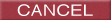
<style>
.page{position:relative;width:111px;height:20px}
.page>*{position:absolute;margin:0}
.t1{font:15.7px "Helvetica";color:#ffffff;scale:1.2 1}
</style>
<div class="page">
<p class="t1" style="left:17px;top:4px;width:76px;height:12px">CANCEL</p>
</div>
